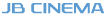
<style>
.page{position:relative;width:106px;height:17px;background:#ffffff}
.page>*{position:absolute;margin:0}
.t1{font:15px "RexliaRg-Regular";letter-spacing:0.015em;color:#5b9bd1;text-transform:uppercase}
</style>
<div class="page">
<p class="t1" style="left:2px;top:3px;width:102px;height:11px">jb cinema</p>
</div>
